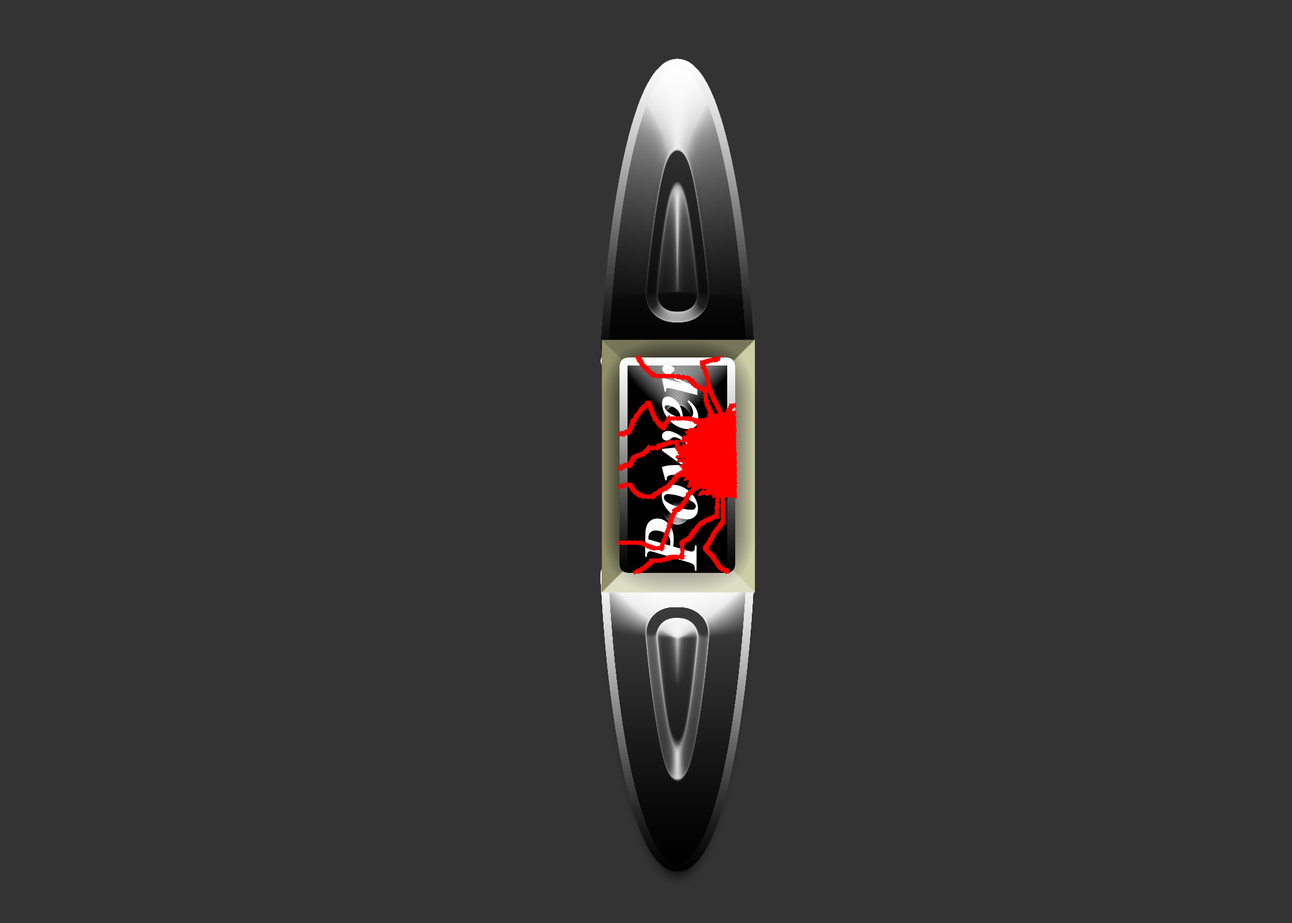
<style>
.page{position:relative;width:1292px;height:923px;background:#333333}
.page>*{position:absolute;margin:0}
.t1{font:77.4px "TimesNewRomanPS-BoldItalicMT";color:#ffffff}
</style>
<div class="page">
<p class="t1" style="left:645px;top:365px;width:53px;height:206px;rotate:-90deg">Power</p>
</div>
